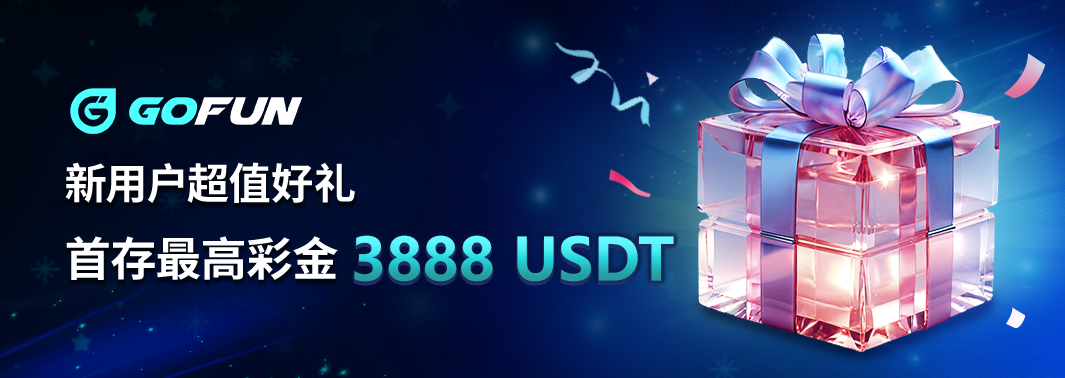
<style>
.page{position:relative;width:1065px;height:378px}
.page>*{position:absolute;margin:0}
.t1{font:42.4px "NotoSansCJKtc-Bold";letter-spacing:-0.01em;color:#ffffff}
.t2{font:46.2px "NotoSansCJKtc-Bold";letter-spacing:-0.01em;color:#ffffff}
</style>
<div class="page">
<p class="t1" style="left:65px;top:162px;width:290px;height:41px">新用户超值好礼</p>
<p class="t2" style="left:66px;top:236px;width:272px;height:44px">首存最高彩金</p>
</div>
